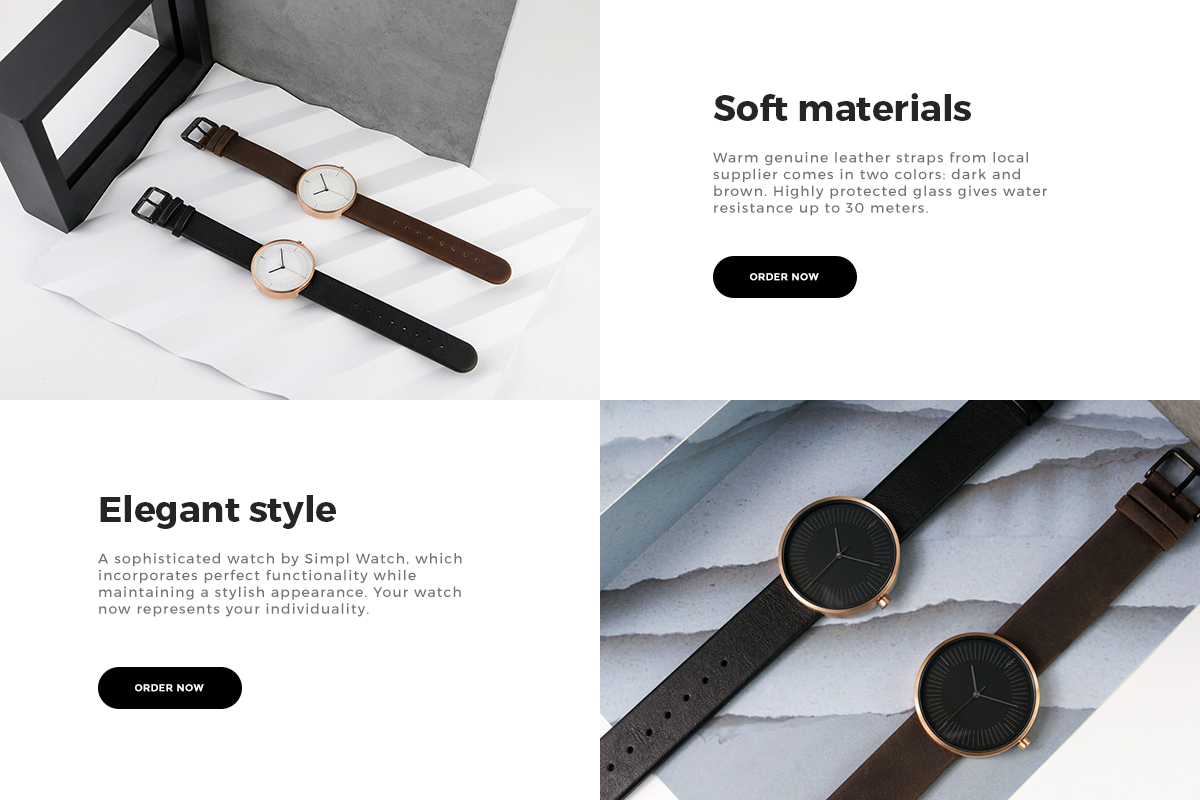
<style>
.page{position:relative;width:1200px;height:800px;background:#ffffff}
.page>*{position:absolute;margin:0}
.t1{font:36px "Montserrat-Bold";color:#242526}
.t2{font:14px "Montserrat-Regular";letter-spacing:0.08em;color:#747474}
.t3{font:10px "Montserrat-Bold";letter-spacing:0.04em;color:#ffffff;text-transform:uppercase}
</style>
<div class="page">
<p class="t1" style="left:713px;top:93px;width:258px;height:28px">Soft materials</p>
<p class="t2" style="left:713px;top:152px;width:334px;height:64px">Warm genuine leather straps from local supplier comes in two colors: dark and brown. Highly protected glass gives water resistance up to 30 meters.</p>
<p class="t3" style="left:750px;top:273px;width:69px;height:8px">order NOW</p>
<p class="t1" style="left:100px;top:495px;width:236px;height:34px">Elegant style</p>
<p class="t2" style="left:98px;top:553px;width:364px;height:64px">A sophisticated watch by Simpl Watch, which incorporates perfect functionality while maintaining a stylish appearance. Your watch now represents your individuality.</p>
<p class="t3" style="left:135px;top:684px;width:69px;height:8px">order NOW</p>
</div>
